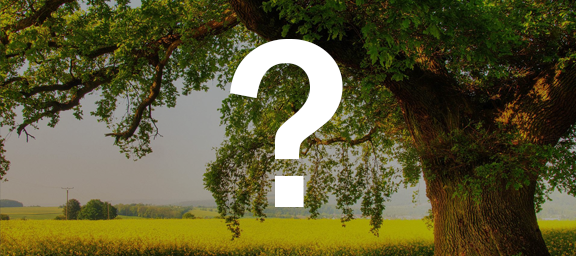
<style>
.page{position:relative;width:576px;height:256px}
.page>*{position:absolute;margin:0}
.t1{font:248.4px "FranklinGothic-Medium";color:#ffffff}
</style>
<div class="page">
<p class="t1" style="left:230px;top:39px;width:113px;height:168px">?</p>
</div>
